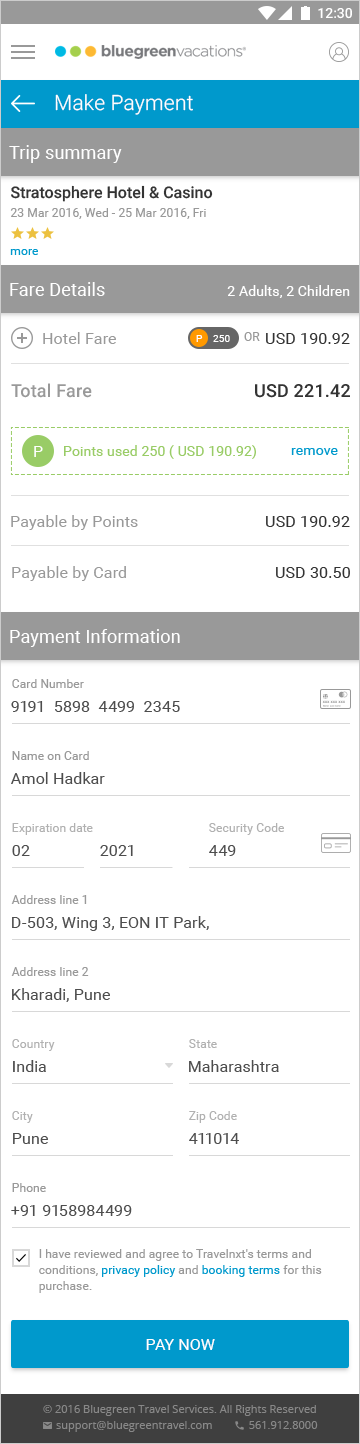
<style>
.page{position:relative;width:360px;height:1444px;background:#ffffff}
.page>*{position:absolute;margin:0}
.t1{font:21px "Roboto-Light";letter-spacing:0.01em;color:#ffffff}
.t2{font:18px "Roboto-Regular";letter-spacing:0.01em;color:#ffffff}
.t3{font:16px "Roboto-Medium";color:#333333}
.t4{font:12px "Roboto-Regular";letter-spacing:0.01em;color:#999999}
.t5{font:12px "Roboto-Regular";letter-spacing:0.01em;color:#0099cc}
.t6{font:14px "Roboto-Regular";letter-spacing:0.01em;color:#ffffff}
.t7{font:16px "Roboto-Regular";letter-spacing:0.01em;color:#999999}
.t8{font:10px "Roboto-Regular";letter-spacing:0.01em;color:#ffffff}
.t9{font:16px "Roboto-Regular";letter-spacing:0.01em;color:#333333}
.t10{font:18px "Roboto-Medium";letter-spacing:0.01em;color:#999999}
.t11{font:18px "Roboto-Medium";letter-spacing:0.01em;color:#333333}
.t12{font:16px "Roboto-Regular";letter-spacing:0.01em;color:#ffffff}
.t13{font:14px "Roboto-Regular";letter-spacing:0.01em;color:#99cc66}
.t14{font:14px "Roboto-Regular";letter-spacing:0.01em;color:#0099cc}
.t15{font:16px "Roboto-Regular";letter-spacing:0.01em;color:#4d4d4d}
.t16{font:12px "Roboto-Regular";letter-spacing:0.01em;color:#b1b1b1}
.t17{font:12px/16px "Roboto-Regular";letter-spacing:0.01em;color:#999999}
.t18{font:12px/16px "Roboto-Regular";letter-spacing:0.01em;color:#0099cc}
.t19{font:16px "Roboto-Regular";letter-spacing:0.01em;color:#ffffff;text-transform:uppercase}
</style>
<div class="page">
<p class="t1" style="left:55px;top:94px;width:138px;height:21px">Make Payment</p>
<p class="t2" style="left:9px;top:145px;width:113px;height:18px">Trip summary</p>
<p class="t3" style="left:11px;top:185px;width:202px;height:17px">Stratosphere Hotel &amp; Casino</p>
<p class="t4" style="left:10px;top:208px;width:196px;height:11px">23 Mar 2016, Wed - 25 Mar 2016, Fri</p>
<p class="t5" style="left:10px;top:249px;width:28px;height:6px">more</p>
<p class="t2" style="left:10px;top:282px;width:95px;height:14px">Fare Details</p>
<p class="t6" style="left:227px;top:285px;width:123px;height:13px">2 Adults, 2 Children</p>
<p class="t7" style="left:43px;top:332px;width:73px;height:12px">Hotel Fare</p>
<p class="t8" style="left:196px;top:335px;width:7px;height:7px">P</p>
<p class="t8" style="left:213px;top:335px;width:17px;height:7px">250</p>
<p class="t4" style="left:244px;top:332px;width:16px;height:9px">OR</p>
<p class="t9" style="left:266px;top:333px;width:84px;height:11px">USD 190.92</p>
<p class="t10" style="left:11px;top:383px;width:81px;height:15px">Total Fare</p>
<p class="t11" style="left:255px;top:384px;width:95px;height:14px">USD 221.42</p>
<p class="t12" style="left:34px;top:446px;width:9px;height:11px">P</p>
<p class="t13" style="left:64px;top:445px;width:192px;height:14px">Points used 250 ( USD 190.92)</p>
<p class="t14" style="left:291px;top:448px;width:47px;height:7px">remove</p>
<p class="t7" style="left:11px;top:515px;width:127px;height:15px">Payable by Points</p>
<p class="t9" style="left:266px;top:516px;width:84px;height:11px">USD 190.92</p>
<p class="t7" style="left:12px;top:566px;width:114px;height:15px">Payable by Card</p>
<p class="t9" style="left:276px;top:567px;width:74px;height:11px">USD 30.50</p>
<p class="t2" style="left:10px;top:629px;width:170px;height:18px">Payment Information</p>
<p class="t4" style="left:12px;top:679px;width:72px;height:9px">Card Number</p>
<p class="t15" style="left:11px;top:701px;width:169px;height:11px">9191  5898  4499  2345</p>
<p class="t4" style="left:12px;top:751px;width:77px;height:9px">Name on Card</p>
<p class="t15" style="left:11px;top:772px;width:94px;height:12px">Amol Hadkar</p>
<p class="t16" style="left:12px;top:823px;width:81px;height:12px">Expiration date</p>
<p class="t16" style="left:209px;top:823px;width:75px;height:12px">Security Code</p>
<p class="t15" style="left:12px;top:845px;width:18px;height:11px">02</p>
<p class="t15" style="left:100px;top:845px;width:33px;height:11px">2021</p>
<p class="t15" style="left:209px;top:845px;width:27px;height:11px">449</p>
<p class="t4" style="left:11px;top:895px;width:76px;height:9px">Address line 1</p>
<p class="t15" style="left:12px;top:916px;width:197px;height:15px">D-503, Wing 3, EON IT Park,</p>
<p class="t4" style="left:11px;top:967px;width:78px;height:9px">Address line 2</p>
<p class="t15" style="left:12px;top:988px;width:98px;height:14px">Kharadi, Pune</p>
<p class="t16" style="left:12px;top:1039px;width:43px;height:12px">Country</p>
<p class="t16" style="left:189px;top:1039px;width:28px;height:9px">State</p>
<p class="t15" style="left:13px;top:1060px;width:33px;height:12px">India</p>
<p class="t15" style="left:189px;top:1060px;width:90px;height:12px">Maharashtra</p>
<p class="t16" style="left:12px;top:1111px;width:21px;height:12px">City</p>
<p class="t16" style="left:189px;top:1111px;width:48px;height:12px">Zip Code</p>
<p class="t15" style="left:13px;top:1133px;width:35px;height:11px">Pune</p>
<p class="t15" style="left:189px;top:1133px;width:50px;height:11px">411014</p>
<p class="t4" style="left:12px;top:1183px;width:34px;height:9px">Phone</p>
<p class="t15" style="left:11px;top:1205px;width:121px;height:11px">+91 9158984499</p>
<p class="t17" style="left:39px;top:1249px;width:283px;height:44px">I have reviewed and agree to Travelnxt's terms and conditions, <span class="t18">privacy policy</span> and <span class="t18">booking terms</span> for this purchase.</p>
<p class="t19" style="left:146px;top:1339px;width:69px;height:11px">pay now</p>
</div>
